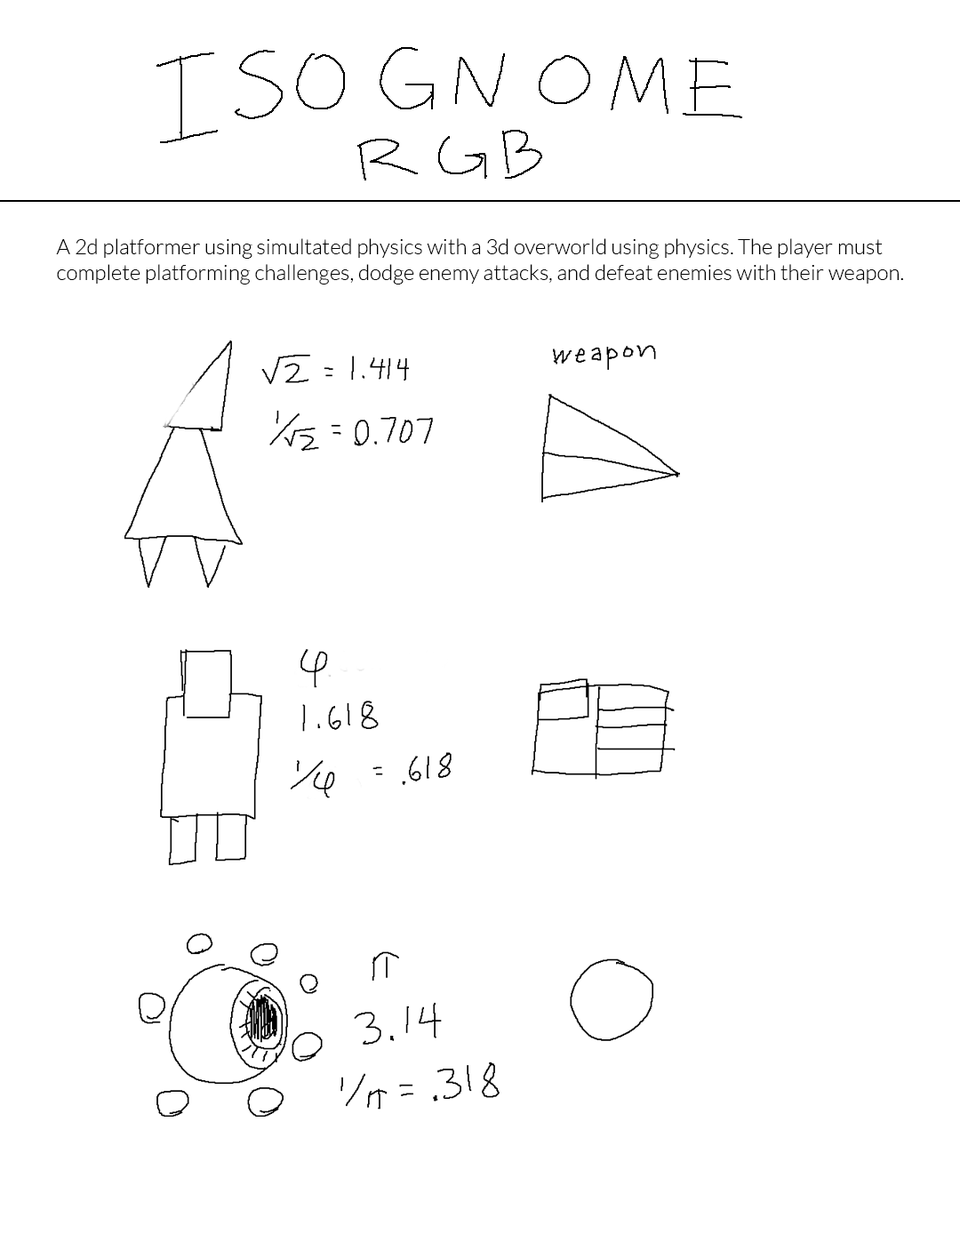
<style>
.page{position:relative;width:960px;height:1242px;background:#ffffff}
.page>*{position:absolute;margin:0}
.t1{font:21.3px "Lato-Light";color:#000000}
</style>
<div class="page">
<p class="t1" style="left:56px;top:238px;width:848px;height:46px">A 2d platformer using simultated physics with a 3d overworld using physics. The player must<br>complete platforming challenges, dodge enemy attacks, and defeat enemies with their weapon.</p>
</div>
